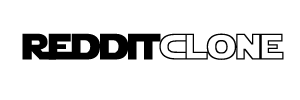
<style>
.page{position:relative;width:300px;height:100px;background:#ffffff}
.page>*{position:absolute;margin:0}
.t1{font:36px "StarJedi";letter-spacing:-0.025em;color:#000000}
.t2{font:36px "StarJediHollow";letter-spacing:-0.025em;color:#000000}
</style>
<div class="page">
<p class="t1" style="left:22px;top:33px;width:262px;height:27px">Reddit<span class="t2">Clone</span></p>
</div>
